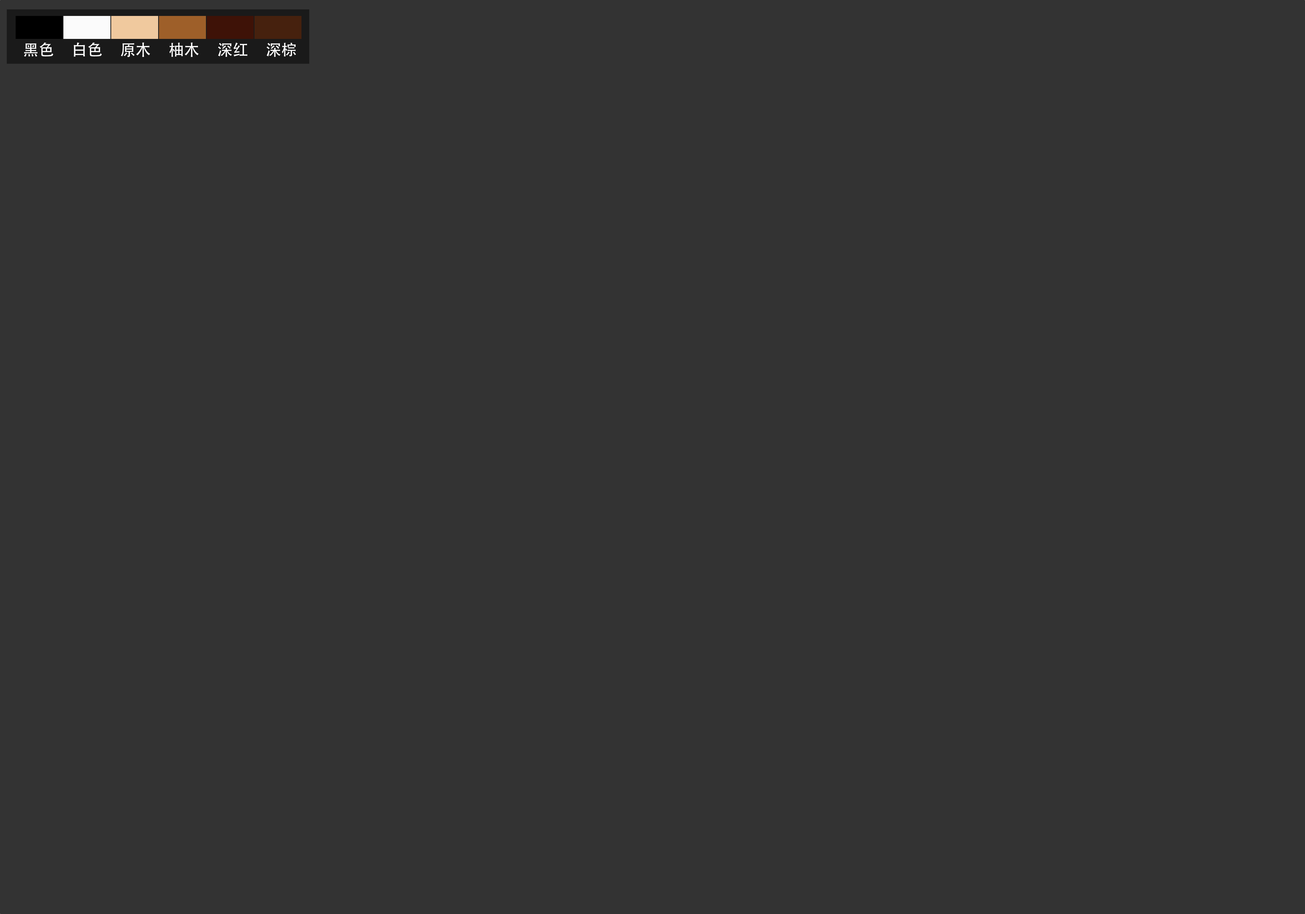
<style>
.page{position:relative;width:1305px;height:914px;background:#333333}
.page>*{position:absolute;margin:0}
.t1{font:15.6px "AdobeHeitiStd-Regular";color:#ffffff}
</style>
<div class="page">
<p class="t1" style="left:24px;top:42px;width:272px;height:15px">黑色     白色     原木     柚木     深红     深棕</p>
</div>
